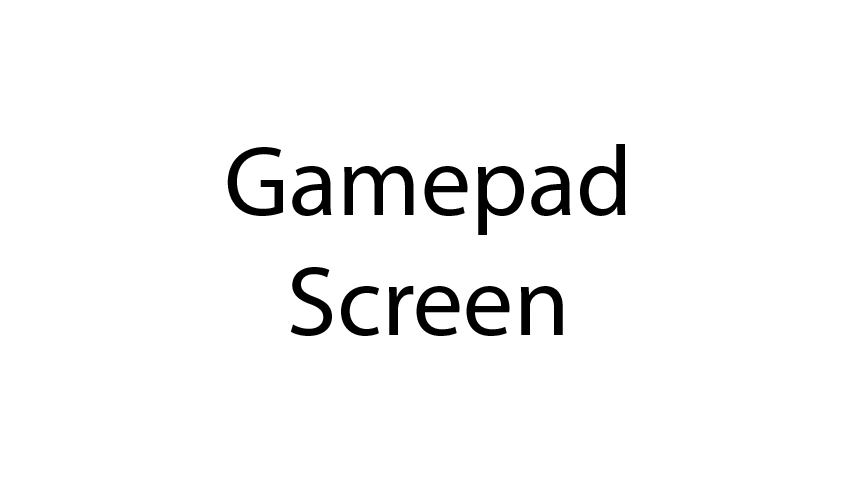
<style>
.page{position:relative;width:854px;height:480px;background:#ffffff}
.page>*{position:absolute;margin:0}
.t1{font:100px "MyriadPro-Regular";color:#000000}
</style>
<div class="page">
<p class="t1" style="left:227px;top:144px;width:399px;height:192px;text-align:center">Gamepad<br>Screen</p>
</div>
